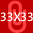
<style>
.page{position:relative;width:33px;height:33px;background:#bf0000}
.page>*{position:absolute;margin:0}
.t1{font:12px "SegoeWP-Semibold";letter-spacing:-0.025em;color:#ffffff;text-transform:uppercase}
</style>
<div class="page">
<p class="t1" style="left:0px;top:12px;width:33px;height:10px">33x33</p>
</div>
